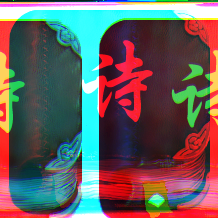
<style>
.page{position:relative;width:218px;height:218px}
.page>*{position:absolute;margin:0}
.t1{font:90px "STXingkai"}
</style>
<div class="page">
<p class="t1" style="left:81px;top:38px;width:72px;height:82px">诗</p>
</div>
